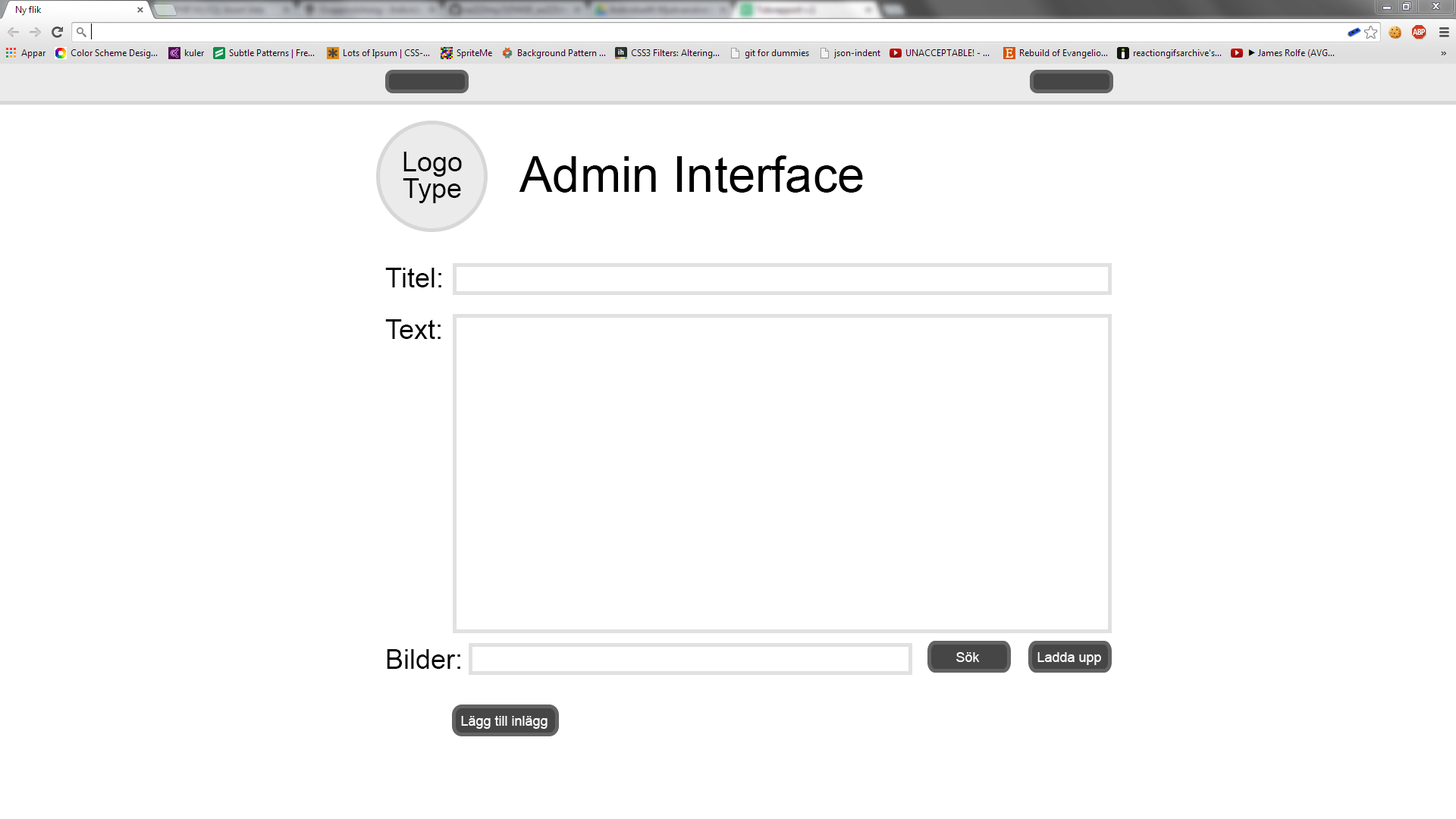
<style>
.page{position:relative;width:1456px;height:819px;background:#ffffff}
.page>*{position:absolute;margin:0}
.t1{font:27.3px/26.5px "ArialMT";color:#000000}
.t2{font:49.3px "ArialMT";color:#000000}
.t3{font:27.3px "ArialMT";color:#000000}
.t4{font:13.6px "ArialMT";color:#ffffff}
</style>
<div class="page">
<p class="t1" style="left:403px;top:152px;width:59px;height:51px;text-align:center">Logo<br>Type</p>
<p class="t2" style="left:519px;top:155px;width:344px;height:38px">Admin Interface</p>
<p class="t3" style="left:385px;top:268px;width:56px;height:19px">Titel:</p>
<p class="t3" style="left:385px;top:319px;width:56px;height:20px">Text:</p>
<p class="t3" style="left:387px;top:649px;width:73px;height:20px">Bilder:</p>
<p class="t4" style="left:956px;top:652px;width:24px;height:10px">Sök</p>
<p class="t4" style="left:1037px;top:652px;width:64px;height:13px">Ladda upp</p>
<p class="t4" style="left:461px;top:716px;width:87px;height:13px">Lägg till inlägg</p>
</div>
